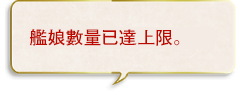
<style>
.page{position:relative;width:237px;height:91px}
.page>*{position:absolute;margin:0}
.t1{font:18px "FutoGoB101Pr5-Bold";color:#bd0800}
</style>
<div class="page">
<p class="t1" style="left:29px;top:29px;width:151px;height:17px">艦娘數量已達上限。</p>
</div>
